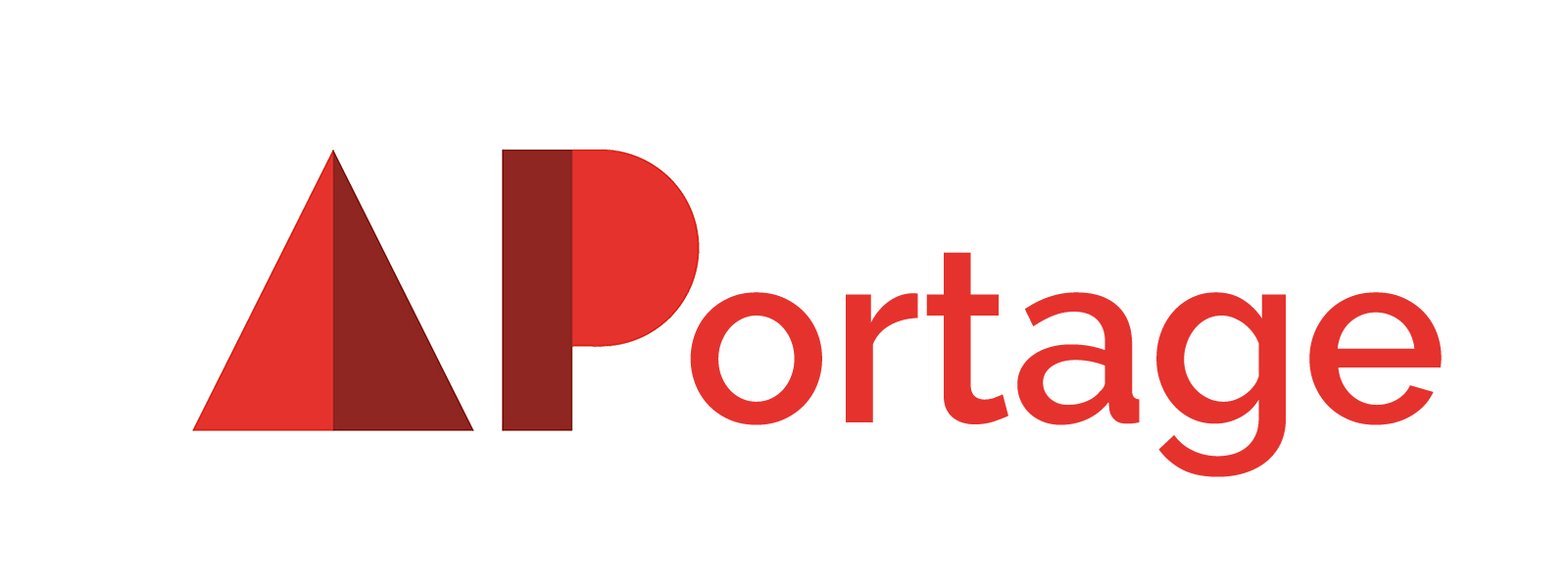
<style>
.page{position:relative;width:1568px;height:588px;background:#ffffff}
.page>*{position:absolute;margin:0}
.t1{font:244px "Raleway-SemiBold";color:#e5322d}
</style>
<div class="page">
<p class="t1" style="left:690px;top:252px;width:752px;height:225px">ortage</p>
</div>
